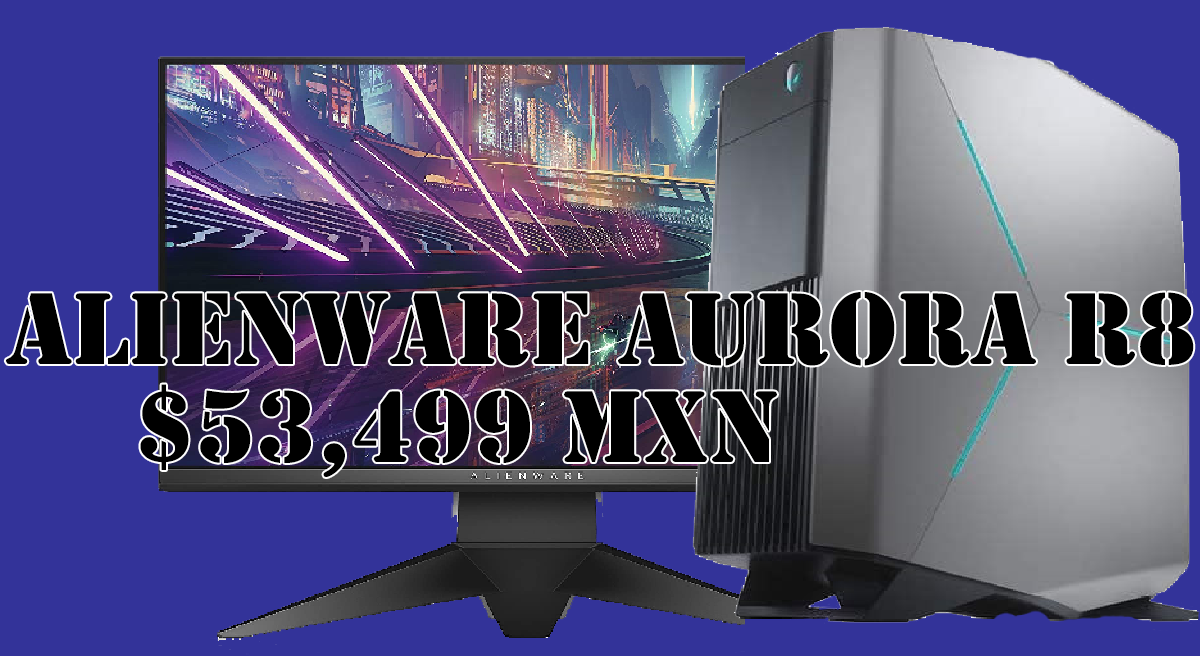
<style>
.page{position:relative;width:1200px;height:656px;background:#333399}
.page>*{position:absolute;margin:0}
.t1{font:105.8px "Stencil";color:#000000}
</style>
<div class="page">
<p class="t1" style="left:5px;top:292px;width:1189px;height:74px">Alienware Aurora R8</p>
<p class="t1" style="left:140px;top:384px;width:637px;height:93px">$53,499 MXN</p>
</div>
